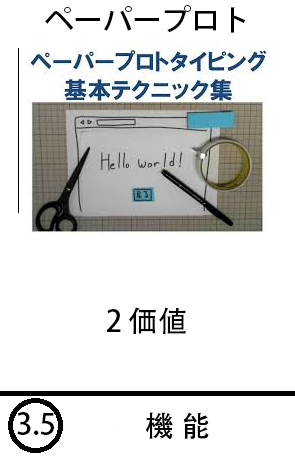
<style>
.page{position:relative;width:295px;height:460px;background:#ffffff}
.page>*{position:absolute;margin:0}
.t1{font:29.3px "AdobeHeitiStd-Regular";color:#000000}
</style>
<div class="page">
<p class="t1" style="left:45px;top:5px;width:201px;height:28px">ペーパープロト</p>
<p class="t1" style="left:107px;top:307px;width:79px;height:28px">2 価値</p>
<p class="t1" style="left:17px;top:412px;width:37px;height:23px">3.5</p>
<p class="t1" style="left:146px;top:412px;width:63px;height:27px">機 能</p>
</div>
